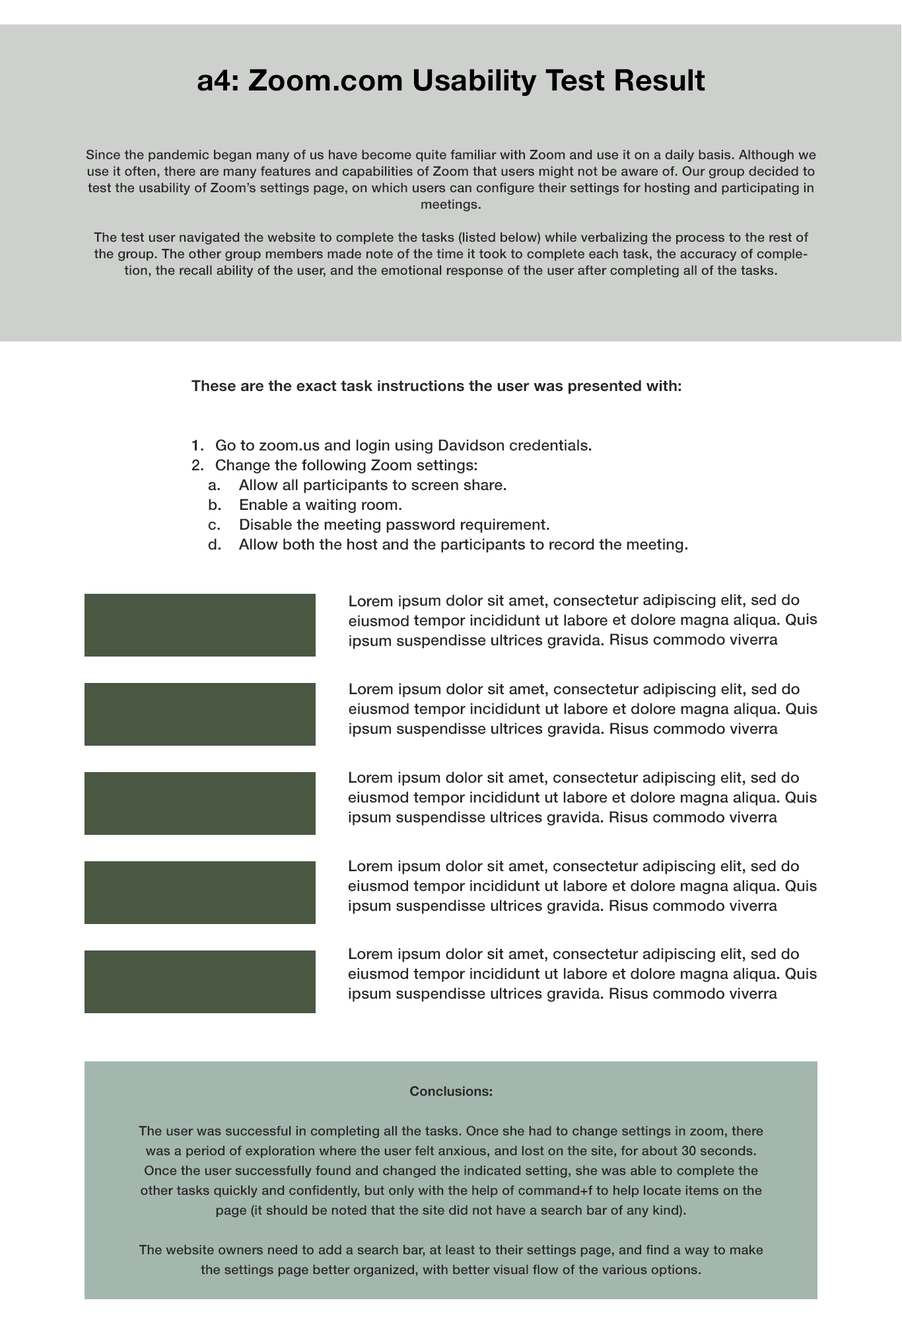
<style>
.page{position:relative;width:902px;height:1321px;background:#ffffff}
.page>*{position:absolute;margin:0}
.t1{font:29.7px "HelveticaNeue-Bold";letter-spacing:0.01em;color:#010101}
.t2{font:13.2px/16.5px "HelveticaNeue-Medium";letter-spacing:0.01em;color:#282728}
.t3{font:15.2px/19.8px "HelveticaNeue-Medium";letter-spacing:0.01em;color:#282728}
.t4{font:15.2px/19.8px "HelveticaNeue-Bold";letter-spacing:0.01em;color:#282728}
.t5{font:15.9px/19.8px "HelveticaNeue-Medium";letter-spacing:0.01em;color:#282728}
.t6{font:13.2px/19.8px "HelveticaNeue-Medium";letter-spacing:0.01em;color:#282728}
.t7{font:13.2px/19.8px "HelveticaNeue-Bold";letter-spacing:0.01em;color:#282728}
</style>
<div class="page">
<p class="t1" style="left:198px;top:69px;width:508px;height:27px">a4: Zoom.com Usability Test Result</p>
<p class="t2" style="left:86px;top:149px;width:731px;height:128px;text-align:center">Since the pandemic began many of us have become quite familiar with Zoom and use it on a daily basis. Although we use it often, there are many features and capabilities of Zoom that users might not be aware of. Our group decided to test the usability of Zoom’s settings page, on which users can configure their settings for hosting and participating in meetings.<br><br>The test user navigated the website to complete the tasks (listed below) while verbalizing the process to the rest of the group. The other group members made note of the time it took to complete each task, the accuracy of completion, the recall ability of the user, and the emotional response of the user after completing all of the tasks.</p>
<p class="t3" style="left:192px;top:380px;width:496px;height:173px"><span class="t4">These are the exact task instructions the user was presented with:<br></span><br><br>1. Go to zoom.us and login using Davidson credentials.<br>2. Change the following Zoom settings:<br>a. Allow all participants to screen share.<br>b. Enable a waiting room.<br>c. Disable the meeting password requirement.<br>d. Allow both the host and the participants to record the meeting<span class="t5">.</span></p>
<p class="t3" style="left:349px;top:594px;width:469px;height:55px">Lorem ipsum dolor sit amet, consectetur adipiscing elit, sed do eiusmod tempor incididunt ut labore et dolore magna aliqua. Quis ipsum suspendisse ultrices gravida. Risus commodo viverra maecenas accumsan lacus vel facilisis.</p>
<p class="t3" style="left:349px;top:683px;width:469px;height:54px">Lorem ipsum dolor sit amet, consectetur adipiscing elit, sed do eiusmod tempor incididunt ut labore et dolore magna aliqua. Quis ipsum suspendisse ultrices gravida. Risus commodo viverra maecenas accumsan lacus vel facilisis.</p>
<p class="t3" style="left:348px;top:772px;width:469px;height:54px">Lorem ipsum dolor sit amet, consectetur adipiscing elit, sed do eiusmod tempor incididunt ut labore et dolore magna aliqua. Quis ipsum suspendisse ultrices gravida. Risus commodo viverra maecenas accumsan lacus vel facilisis.</p>
<p class="t3" style="left:348px;top:860px;width:469px;height:54px">Lorem ipsum dolor sit amet, consectetur adipiscing elit, sed do eiusmod tempor incididunt ut labore et dolore magna aliqua. Quis ipsum suspendisse ultrices gravida. Risus commodo viverra maecenas accumsan lacus vel facilisis.</p>
<p class="t3" style="left:348px;top:948px;width:469px;height:54px">Lorem ipsum dolor sit amet, consectetur adipiscing elit, sed do eiusmod tempor incididunt ut labore et dolore magna aliqua. Quis ipsum suspendisse ultrices gravida. Risus commodo viverra maecenas accumsan lacus vel facilisis.</p>
<p class="t6" style="left:139px;top:1086px;width:625px;height:191px;text-align:center"><span class="t7">Conclusions: <br><br></span>The user was successful in completing all the tasks. Once she had to change settings in zoom, there was a period of exploration where the user felt anxious, and lost on the site, for about 30 seconds. Once the user successfully found and changed the indicated setting, she was able to complete the other tasks quickly and confidently, but only with the help of command+f to help locate items on the page (it should be noted that the site did not have a search bar of any kind).<br><br>The website owners need to add a search bar, at least to their settings page, and find a way to make the settings page better organized, with better visual flow of the various options.</p>
</div>
